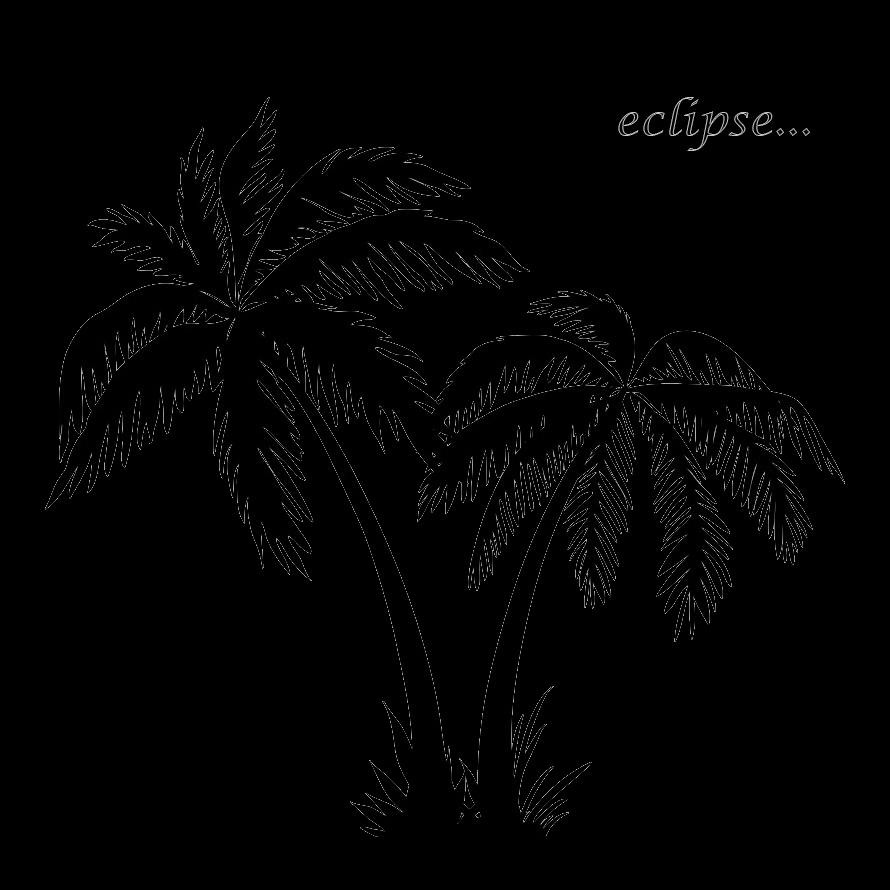
<style>
.page{position:relative;width:890px;height:890px;background:#000000}
.page>*{position:absolute;margin:0}
.t1{font:45.8px "LucidaCalligraphy-Italic"}
</style>
<div class="page">
<p class="t1" style="left:618px;top:97px;width:192px;height:54px">eclipse...</p>
</div>
